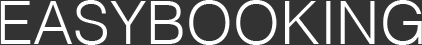
<style>
.page{position:relative;width:422px;height:45px;background:#333333}
.page>*{position:absolute;margin:0}
.t1{font:60px "Helvetica-Light";color:#ffffff}
</style>
<div class="page">
<p class="t1" style="left:0px;top:0px;width:422px;height:45px">EASYBOOKING</p>
</div>
